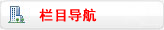
<style>
.page{position:relative;width:164px;height:30px;background:#ffffff}
.page>*{position:absolute;margin:0}
.t1{font:14px "SimHei";color:#ff0000;font-weight:bold}
</style>
<div class="page">
<p class="t1" style="left:39px;top:8px;width:58px;height:14px">栏目导航</p>
</div>
